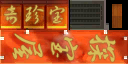
<style>
.page{position:relative;width:128px;height:64px}
.page>*{position:absolute;margin:0}
.t1{font:24px "SJlingyunzhangcao";color:#d6bd5a}
.t2{font:20px "JXC";color:#d6bd5a;font-weight:bold}
.t3{font:31px "JXC";color:#d6bd5a;font-weight:bold}
</style>
<div class="page">
<p class="t1" style="left:4px;top:5px;width:13px;height:19px">奇</p>
<p class="t2" style="left:25px;top:5px;width:19px;height:19px">珍</p>
<p class="t2" style="left:49px;top:6px;width:16px;height:18px">宝</p>
<p class="t3" style="left:12px;top:33px;width:31px;height:26px;rotate:86deg">屋</p>
<p class="t3" style="left:51px;top:37px;width:27px;height:24px;rotate:90deg">宝</p>
<p class="t3" style="left:88px;top:34px;width:28px;height:28px;rotate:90deg">探</p>
</div>
